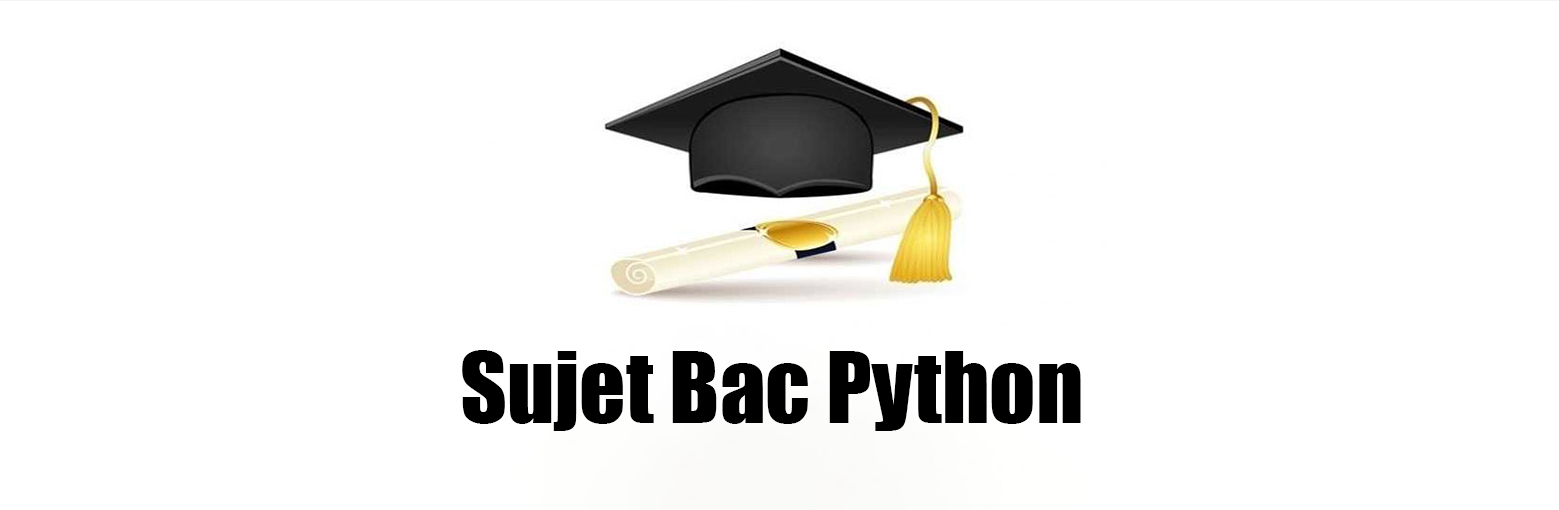
<style>
.page{position:relative;width:1559px;height:510px;background:#ffffff}
.page>*{position:absolute;margin:0}
.t1{font:90.7px "Impact";color:#000000}
</style>
<div class="page">
<p class="t1" style="left:462px;top:350px;width:619px;height:81px">Sujet Bac Python</p>
</div>
